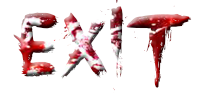
<style>
.page{position:relative;width:200px;height:93px;background:#ffffff}
.page>*{position:absolute;margin:0}
.t1{font:120px "DKFaceYourFears"}
</style>
<div class="page">
<p class="t1" style="left:13px;top:0px;width:179px;height:94px">Exit</p>
</div>
